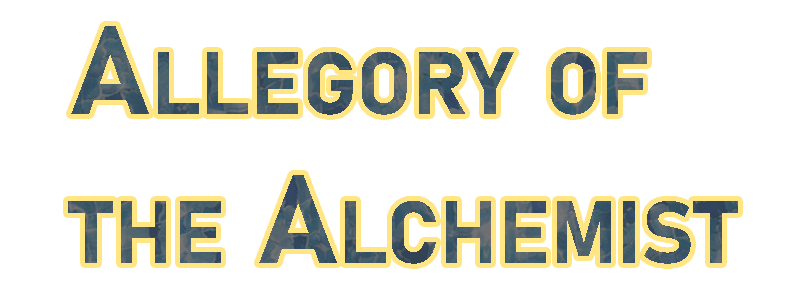
<style>
.page{position:relative;width:791px;height:288px;background:#ffffff}
.page>*{position:absolute;margin:0}
.t1{font:124px "Bahnschrift-Bold";color:#455b69;font-variant:small-caps}
</style>
<div class="page">
<p class="t1" style="left:68px;top:26px;width:670px;height:238px">Allegory of<br>the Alchemist</p>
</div>
